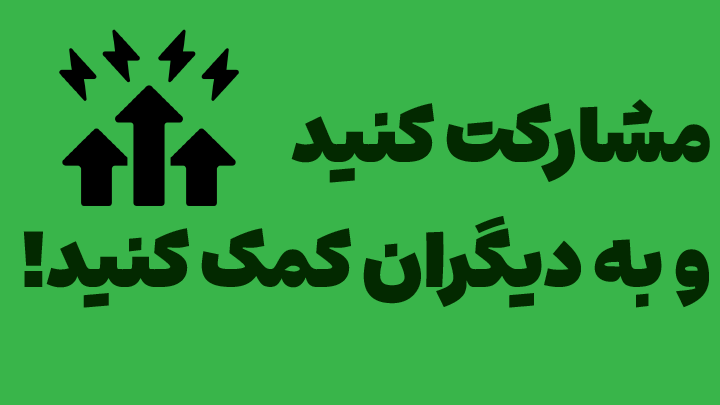
<style>
.page{position:relative;width:720px;height:405px;background:#39b54a}
.page>*{position:absolute;margin:0}
.t1{font:75px/125px "EstedadMad-Fat";color:#042a00}
</style>
<div class="page">
<p class="t1" style="left:23px;top:99px;width:687px;height:209px">مشارکت کنید<br>و به دیگران کمک کنید!</p>
</div>
